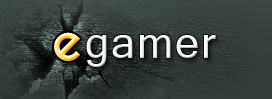
<style>
.page{position:relative;width:272px;height:99px}
.page>*{position:absolute;margin:0}
.t1{font:63px "REZ";letter-spacing:0.025em}
.t2{font:69px "Kartika";letter-spacing:0.025em;color:#ffffff}
</style>
<div class="page">
<p class="t1" style="left:54px;top:32px;width:27px;height:29px">e</p>
<p class="t2" style="left:86px;top:35px;width:130px;height:32px">gamer</p>
</div>
